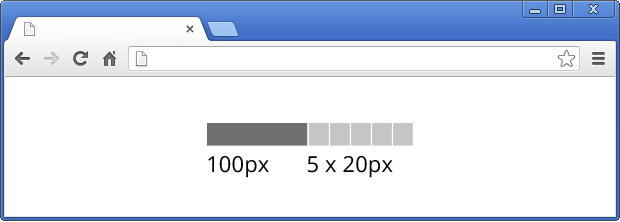
<style>
.page{position:relative;width:620px;height:222px;background:#ffffff}
.page>*{position:absolute;margin:0}
.t1{font:22px "OpenSans";letter-spacing:0.005em;color:#000000}
</style>
<div class="page">
<p class="t1" style="left:208px;top:156px;width:61px;height:22px">100px</p>
<p class="t1" style="left:308px;top:156px;width:85px;height:22px">5 x 20px</p>
</div>
